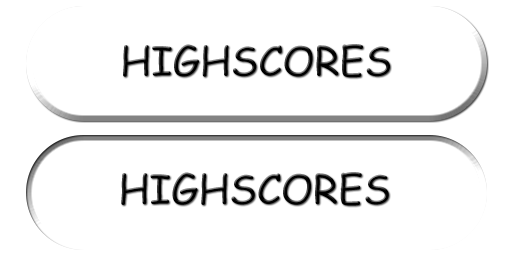
<style>
.page{position:relative;width:512px;height:256px;background:#ffffff}
.page>*{position:absolute;margin:0}
.t1{font:40px "ComicSansMS";color:#000000}
.t2{font:40.3px "ComicSansMS";color:#000000}
</style>
<div class="page">
<p class="t1" style="left:123px;top:44px;width:267px;height:34px">HIGHSCORES</p>
<p class="t2" style="left:121px;top:172px;width:268px;height:34px">HIGHSCORES</p>
</div>
